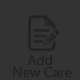
<style>
.page{position:relative;width:80px;height:80px;background:#333333}
.page>*{position:absolute;margin:0}
.t1{font:14px/12px "SegoeUI-Regular";color:#202020}
</style>
<div class="page">
<p class="t1" style="left:13px;top:55px;width:59px;height:22px;text-align:center">Add <br>New Care</p>
</div>
